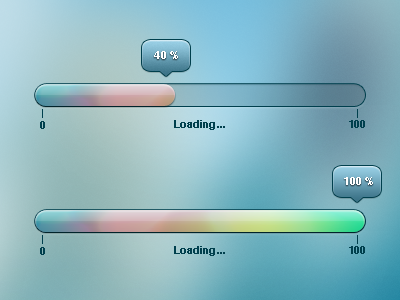
<style>
.page{position:relative;width:400px;height:300px}
.page>*{position:absolute;margin:0}
.t1{font:11px "Helvetica-Bold";letter-spacing:0.1em;color:#ffffff}
.t2{font:11px "Helvetica-Bold";color:#003f4d}
.t3{font:11px "Helvetica-Bold";letter-spacing:-0.14em;color:#003f4d}
.t4{font:11px "Helvetica-Bold";color:#ffffff}
</style>
<div class="page">
<p class="t1" style="left:154px;top:51px;width:24px;height:8px">40%</p>
<p class="t2" style="left:40px;top:121px;width:5px;height:8px">0</p>
<p class="t2" style="left:174px;top:120px;width:51px;height:10px">Loading...</p>
<p class="t2" style="left:349px;top:120px;width:16px;height:8px"><span class="t3">1</span>00</p>
<p class="t4" style="left:344px;top:177px;width:29px;height:8px">10<span class="t1">0%</span></p>
<p class="t2" style="left:174px;top:246px;width:51px;height:10px">Loading...</p>
<p class="t2" style="left:349px;top:246px;width:16px;height:8px"><span class="t3">1</span>00</p>
<p class="t2" style="left:40px;top:247px;width:5px;height:8px">0</p>
</div>
